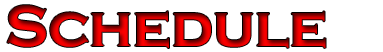
<style>
.page{position:relative;width:383px;height:52px;background:#ffffff}
.page>*{position:absolute;margin:0}
.t1{font:60px "CopperplateGothic-Bold"}
</style>
<div class="page">
<p class="t1" style="left:7px;top:5px;width:319px;height:43px">Schedule</p>
</div>
